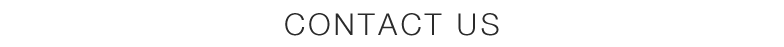
<style>
.page{position:relative;width:784px;height:47px;background:#ffffff}
.page>*{position:absolute;margin:0}
.t1{font:30px "HelveticaNeue-Light";letter-spacing:0.11em;color:#2a2a2a}
</style>
<div class="page">
<p class="t1" style="left:285px;top:13px;width:214px;height:23px">CONTACT US</p>
</div>
